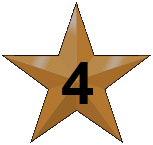
<style>
.page{position:relative;width:153px;height:145px;background:#ffffff}
.page>*{position:absolute;margin:0}
.t1{font:60px "Arial-BoldMT";color:#000000}
</style>
<div class="page">
<p class="t1" style="left:62px;top:62px;width:31px;height:42px">4</p>
</div>
